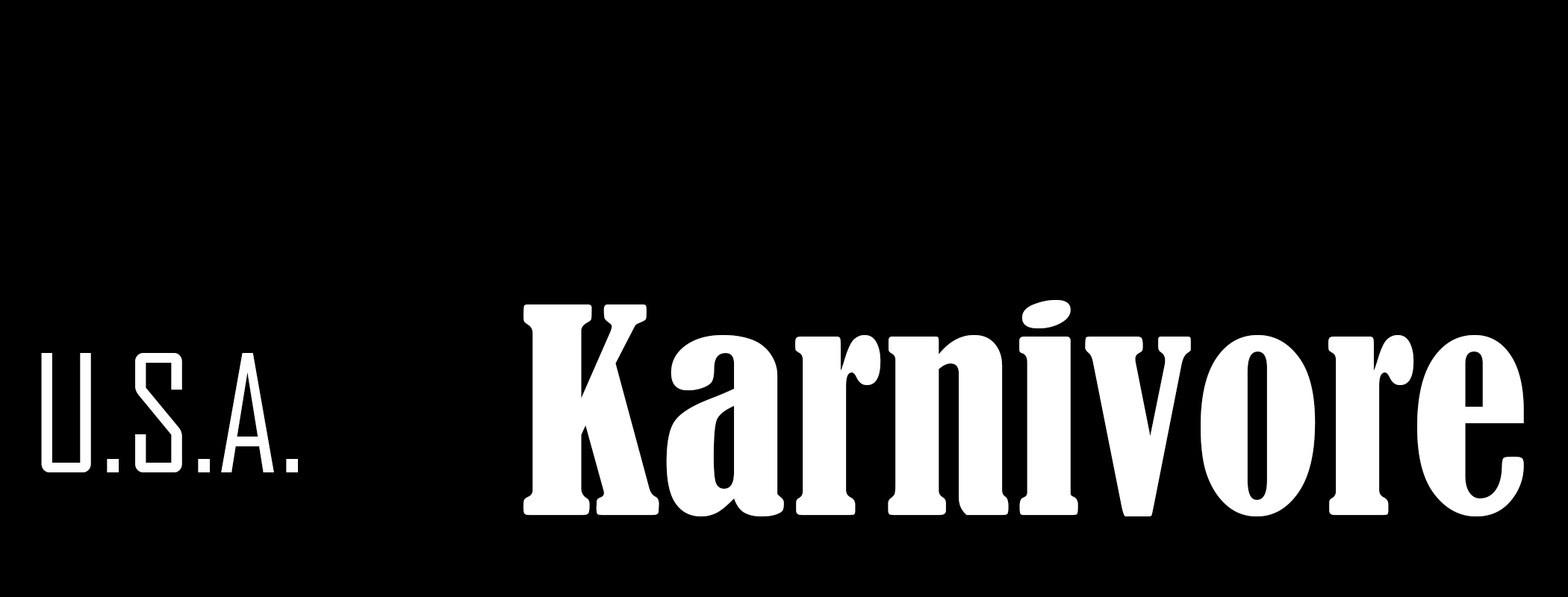
<style>
.page{position:relative;width:1568px;height:597px;background:#000000}
.page>*{position:absolute;margin:0}
.t1{font:267.2px "BernardMT-Condensed";color:#ffffff}
.t2{font:155.9px "AgencyFB-Reg";color:#ffffff}
</style>
<div class="page">
<p class="t1" style="left:523px;top:300px;width:1001px;height:217px">Karnivore</p>
<p class="t2" style="left:41px;top:353px;width:257px;height:120px">U.S.A.</p>
</div>
